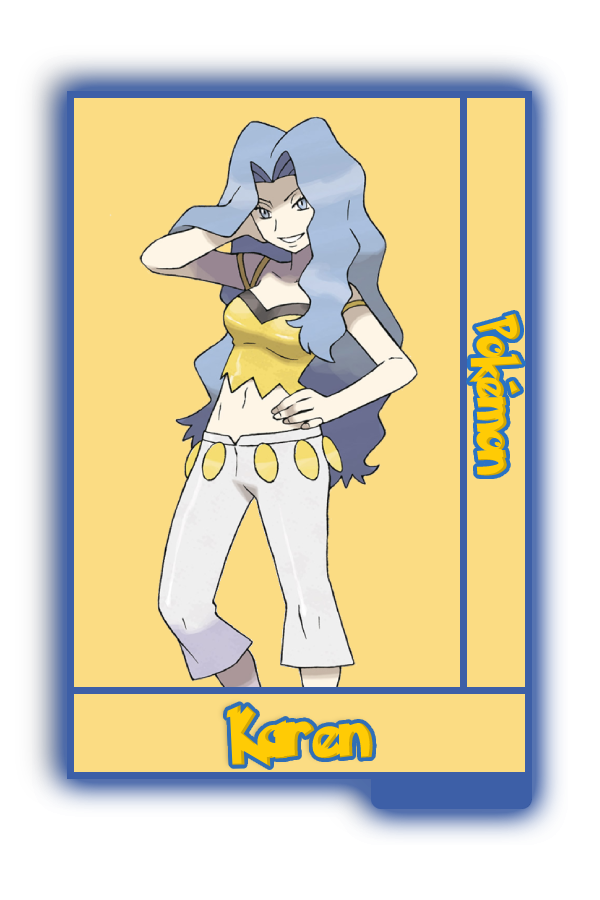
<style>
.page{position:relative;width:600px;height:900px;background:#fbdc83}
.page>*{position:absolute;margin:0}
.t1{font:48.8px "PokemonSolidNormal";color:#ffcb05;scale:0.8 1}
.t2{font:56.6px "PokemonSolidNormal";color:#ffcb05;scale:0.92 1}
</style>
<div class="page">
<p class="t1" style="left:469px;top:313px;width:54px;height:163px;rotate:90deg">Pokémon</p>
<p class="t2" style="left:226px;top:704px;width:147px;height:63px">Karen</p>
</div>
